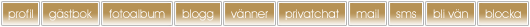
<style>
.page{position:relative;width:530px;height:27px;background:#b69255}
.page>*{position:absolute;margin:0}
.t1{font:12px "AvantGardeITCbyBT-Book";color:#ffffff}
.t2{font:12px "AvantGardeITCbyBT-Book";color:#fffefe}
.t3{font:12px "AvantGardeITCbyBT-Book"}
</style>
<div class="page">
<p class="t1" style="left:8px;top:9px;width:25px;height:11px">profil</p>
<p class="t1" style="left:49px;top:9px;width:43px;height:12px">gästbok</p>
<p class="t1" style="left:109px;top:9px;width:56px;height:9px">fotoalbum</p>
<p class="t2" style="left:182px;top:9px;width:32px;height:12px">blogg</p>
<p class="t1" style="left:231px;top:9px;width:37px;height:9px">vänner</p>
<p class="t1" style="left:285px;top:9px;width:54px;height:11px">privatchat</p>
<p class="t1" style="left:356px;top:9px;width:23px;height:9px">mail</p>
<p class="t3" style="left:396px;top:11px;width:20px;height:7px">sms</p>
<p class="t2" style="left:433px;top:9px;width:35px;height:9px">bli vän</p>
<p class="t1" style="left:485px;top:9px;width:36px;height:9px">blocka</p>
</div>
